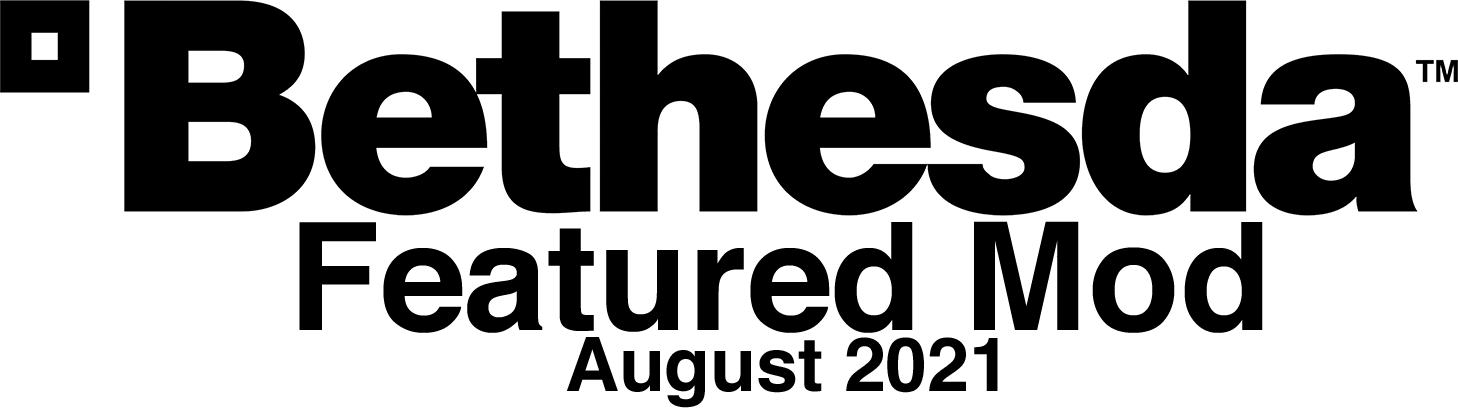
<style>
.page{position:relative;width:1458px;height:408px;background:#ffffff}
.page>*{position:absolute;margin:0}
.t1{font:150px "Helvetica-Bold";color:#000000}
.t2{font:75px "Helvetica-Bold";color:#000000}
</style>
<div class="page">
<p class="t1" style="left:299px;top:221px;width:964px;height:112px">Featured Mod</p>
<p class="t2" style="left:566px;top:337px;width:432px;height:71px">August 2021</p>
</div>
